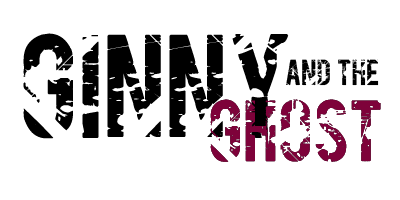
<style>
.page{position:relative;width:400px;height:200px;background:#ffffff}
.page>*{position:absolute;margin:0}
.t1{font:121.3px "Gesso";color:#000000}
.t2{font:30px "Gesso";color:#000000}
.t3{font:72px "Gesso";color:#7e023a}
</style>
<div class="page">
<p class="t1" style="left:23px;top:33px;width:266px;height:106px">Ginny</p>
<p class="t2" style="left:286px;top:59px;width:93px;height:27px">and the</p>
<p class="t3" style="left:210px;top:99px;width:171px;height:63px">ghost</p>
</div>
